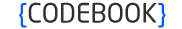
<style>
.page{position:relative;width:182px;height:29px;background:#ffffff}
.page>*{position:absolute;margin:0}
.t1{font:26.3px "NeoSans";color:#303030}
.t2{font:26.3px "NeoSans";color:#005aff}
</style>
<div class="page">
<p class="t1" style="left:19px;top:2px;width:147px;height:26px"><span class="t2">{</span>CODEBOOK<span class="t2">}</span></p>
</div>
